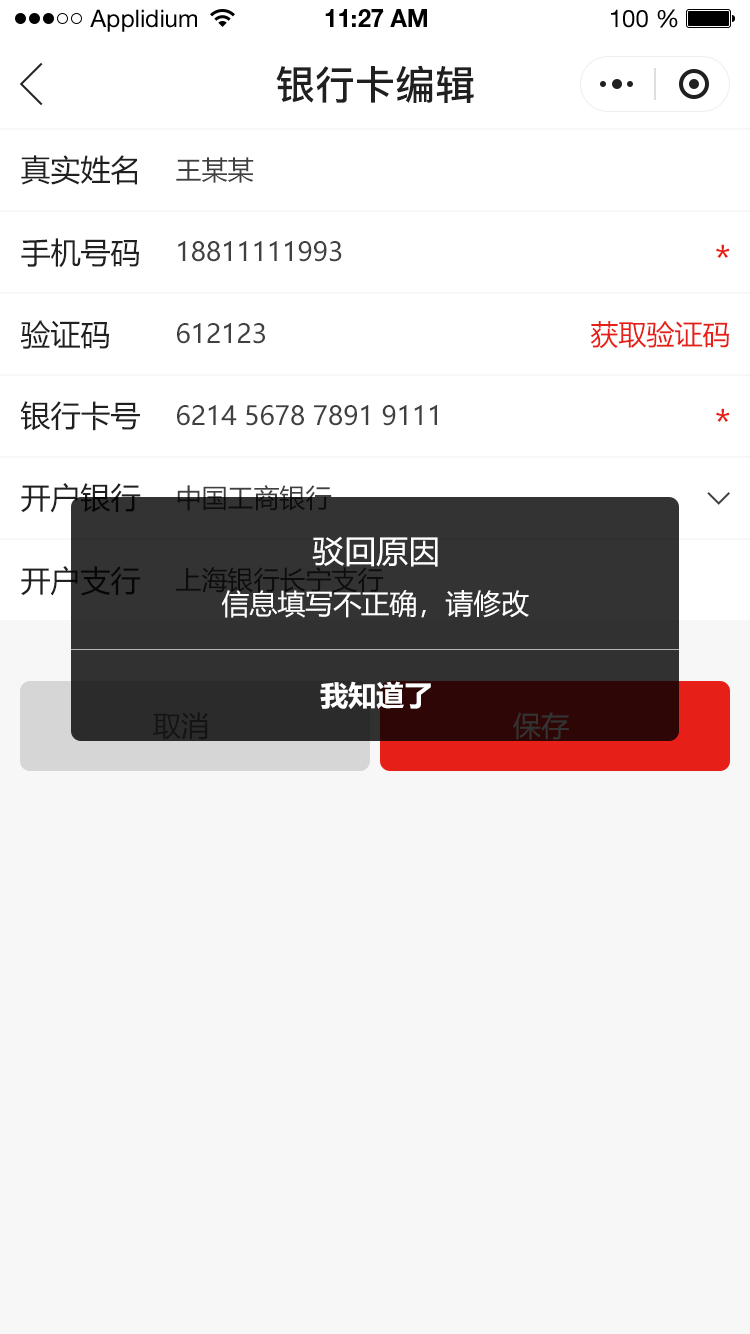
<style>
.page{position:relative;width:750px;height:1334px;background:#f7f7f7}
.page>*{position:absolute;margin:0}
.t1{font:24px "HelveticaNeueLTStd-Roman";color:#000000}
.t2{font:24px "HelveticaNeueLTStd-Bd";color:#000000}
.t3{font:40px "PingFang-SC-Bold";color:#202020;text-transform:uppercase}
.t4{font:30px "MicrosoftYaHei";color:#202020;text-transform:uppercase}
.t5{font:26px "MicrosoftYaHei";color:#404040;text-transform:uppercase}
.t6{font:36px "MicrosoftYaHei";color:#e61f18;text-transform:uppercase}
.t7{font:28px "MicrosoftYaHei";color:#e61f18;text-transform:uppercase}
.t8{font:26px "MicrosoftYaHei";text-transform:uppercase}
.t9{font:32px "MicrosoftYaHei";color:#ffffff;text-transform:uppercase}
.t10{font:30px "MicrosoftYaHei";text-transform:uppercase}
.t11{font:26px "MicrosoftYaHei";color:#0d0d0d;text-transform:uppercase}
.t12{font:28px "MicrosoftYaHei";color:#ffffff;text-transform:uppercase}
.t13{font:28px "MicrosoftYaHei-Bold";color:#ffffff;text-transform:uppercase}
.t14{font:28px "MicrosoftYaHei";color:#141414;text-transform:uppercase}
.t15{font:28px "MicrosoftYaHei";color:#333333;text-transform:uppercase}
</style>
<div class="page">
<p class="t1" style="left:90px;top:9px;width:107px;height:23px">Applidium</p>
<p class="t2" style="left:325px;top:9px;width:102px;height:18px">11:27 AM</p>
<p class="t1" style="left:611px;top:9px;width:67px;height:19px">100 %</p>
<p class="t3" style="left:276px;top:65px;width:198px;height:38px">银行卡编辑</p>
<p class="t4" style="left:21px;top:155px;width:116px;height:30px">真实姓名</p>
<p class="t5" style="left:176px;top:157px;width:78px;height:26px">王某某</p>
<p class="t4" style="left:21px;top:238px;width:118px;height:30px">手机号码</p>
<p class="t5" style="left:178px;top:241px;width:164px;height:21px">18811111993</p>
<p class="t6" style="left:716px;top:244px;width:14px;height:14px">*</p>
<p class="t4" style="left:20px;top:320px;width:89px;height:29px">验证码</p>
<p class="t5" style="left:177px;top:323px;width:88px;height:21px">612123</p>
<p class="t7" style="left:590px;top:321px;width:139px;height:28px">获取验证码</p>
<p class="t4" style="left:20px;top:401px;width:120px;height:30px">银行卡号</p>
<p class="t5" style="left:177px;top:405px;width:260px;height:21px">6214 5678 7891 9111</p>
<p class="t6" style="left:716px;top:408px;width:14px;height:14px">*</p>
<p class="t4" style="left:21px;top:483px;width:120px;height:30px">开户银行</p>
<p class="t8" style="left:177px;top:485px;width:155px;height:26px">中国工商银行</p>
<p class="t9" style="left:312px;top:536px;width:126px;height:31px">驳回原因</p>
<p class="t10" style="left:21px;top:566px;width:120px;height:30px">开户支行</p>
<p class="t11" style="left:176px;top:567px;width:208px;height:26px">上海银行长宁支行</p>
<p class="t12" style="left:221px;top:590px;width:308px;height:28px">信息填写不正确，请修改</p>
<p class="t13" style="left:320px;top:681px;width:111px;height:28px">我知道了</p>
<p class="t14" style="left:153px;top:712px;width:55px;height:28px">取消</p>
<p class="t15" style="left:513px;top:712px;width:56px;height:28px">保存</p>
</div>
